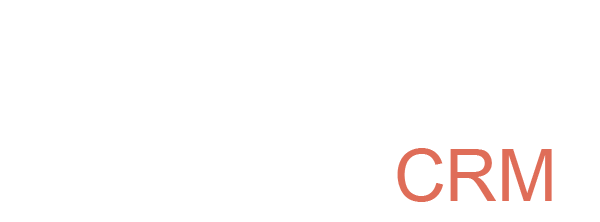
<style>
.page{position:relative;width:600px;height:222px;background:#ffffff}
.page>*{position:absolute;margin:0}
.t1{font:72px "ArialMT";color:#df6d58}
</style>
<div class="page">
<p class="t1" style="left:397px;top:148px;width:155px;height:54px">CRM</p>
</div>
